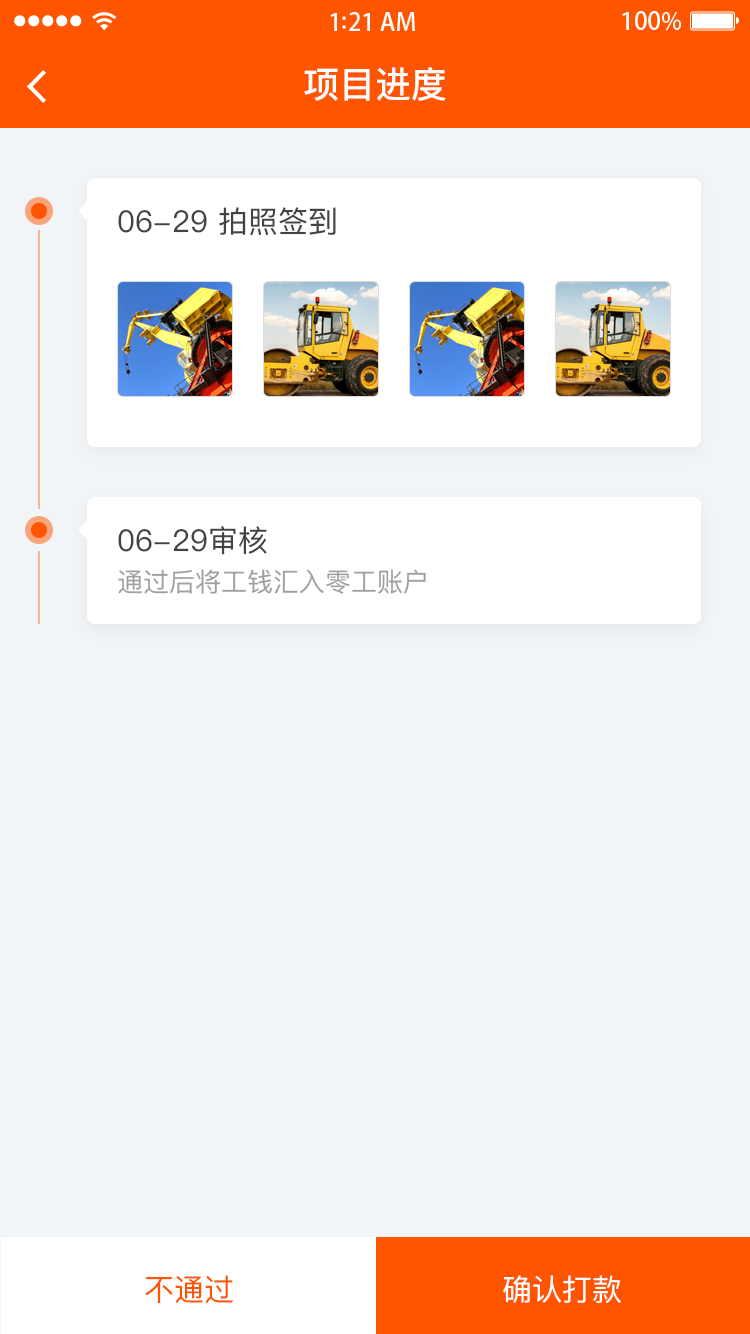
<style>
.page{position:relative;width:750px;height:1334px;background:#f2f5f7}
.page>*{position:absolute;margin:0}
.t1{font:36px "PingFangSC-Medium";color:#ffffff}
.t2{font:30px "PingFangSC-Regular";color:#434343}
.t3{font:26px/44px "PingFangSC-Regular";color:#a0a0a0}
.t4{font:30px/44px "PingFangSC-Regular";color:#434343}
.t5{font:30px "PingFangSC-Regular";color:#ff5400}
.t6{font:30px "PingFangSC-Regular";color:#ffffff}
</style>
<div class="page">
<p class="t1" style="left:304px;top:67px;width:142px;height:34px">项目进度</p>
<p class="t2" style="left:118px;top:207px;width:218px;height:29px">06-29 拍照签到</p>
<p class="t3" style="left:118px;top:526px;width:308px;height:68px"><span class="t4">06-29审核<br></span>通过后将工钱汇入零工账户</p>
<p class="t5" style="left:145px;top:1275px;width:88px;height:29px">不通过</p>
<p class="t6" style="left:503px;top:1275px;width:118px;height:29px">确认打款</p>
</div>
